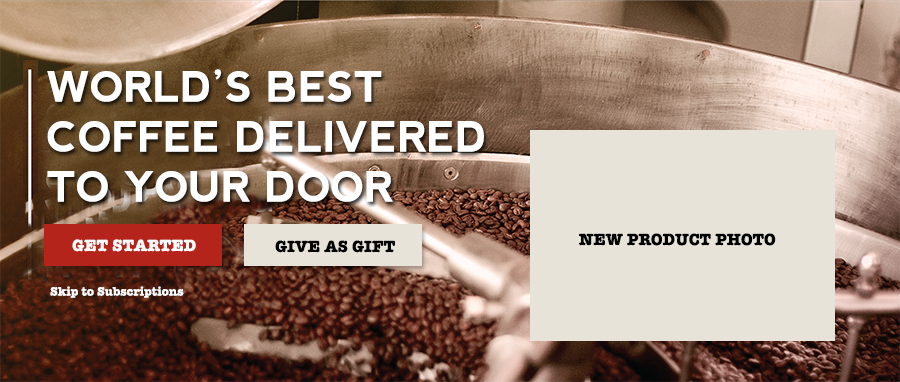
<style>
.page{position:relative;width:900px;height:382px}
.page>*{position:absolute;margin:0}
.t1{font:41.7px "nevis-Bold";color:#ffffff;text-transform:uppercase}
.t2{font:16.7px "AmericanTypewriter-Bold";color:#000000;text-transform:uppercase}
.t3{font:16.7px "AmericanTypewriter-Bold";color:#ffffff;text-transform:uppercase}
.t4{font:12.5px "AmericanTypewriter-Bold";color:#ffffff}
</style>
<div class="page">
<p class="t1" style="left:47px;top:69px;width:437px;height:133px">world’s best coffee delivered to your door</p>
<p class="t2" style="left:578px;top:233px;width:198px;height:13px">new product photo</p>
<p class="t3" style="left:72px;top:239px;width:124px;height:13px">get started</p>
<p class="t2" style="left:275px;top:240px;width:120px;height:13px">give as gift</p>
<p class="t4" style="left:50px;top:286px;width:134px;height:12px">Skip to Subscriptions</p>
</div>
